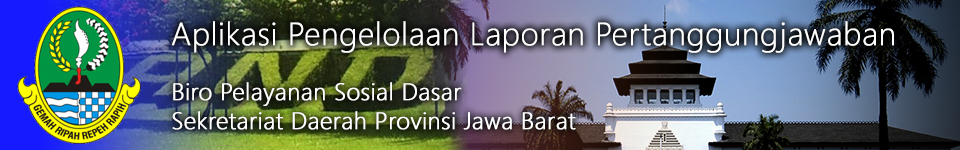
<style>
.page{position:relative;width:960px;height:150px}
.page>*{position:absolute;margin:0}
.t1{font:32px "SegoeUI-Light";color:#ffffff;font-weight:bold}
.t2{font:24px "SegoeUI-Light";color:#ffffff;font-weight:bold}
</style>
<div class="page">
<p class="t1" style="left:171px;top:21px;width:723px;height:32px">Aplikasi Pengelolaan Laporan Pertanggungjawaban</p>
<p class="t2" style="left:172px;top:82px;width:404px;height:48px">Biro Pelayanan Sosial Dasar<br>Sekretariat Daerah Provinsi Jawa Barat</p>
</div>
